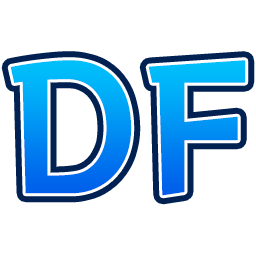
<style>
.page{position:relative;width:256px;height:256px;background:#ffffff}
.page>*{position:absolute;margin:0}
.t1{font:166.7px "RocknRollOne-Regular";font-weight:bold}
</style>
<div class="page">
<p class="t1" style="left:10px;top:60px;width:236px;height:136px">DF</p>
</div>
